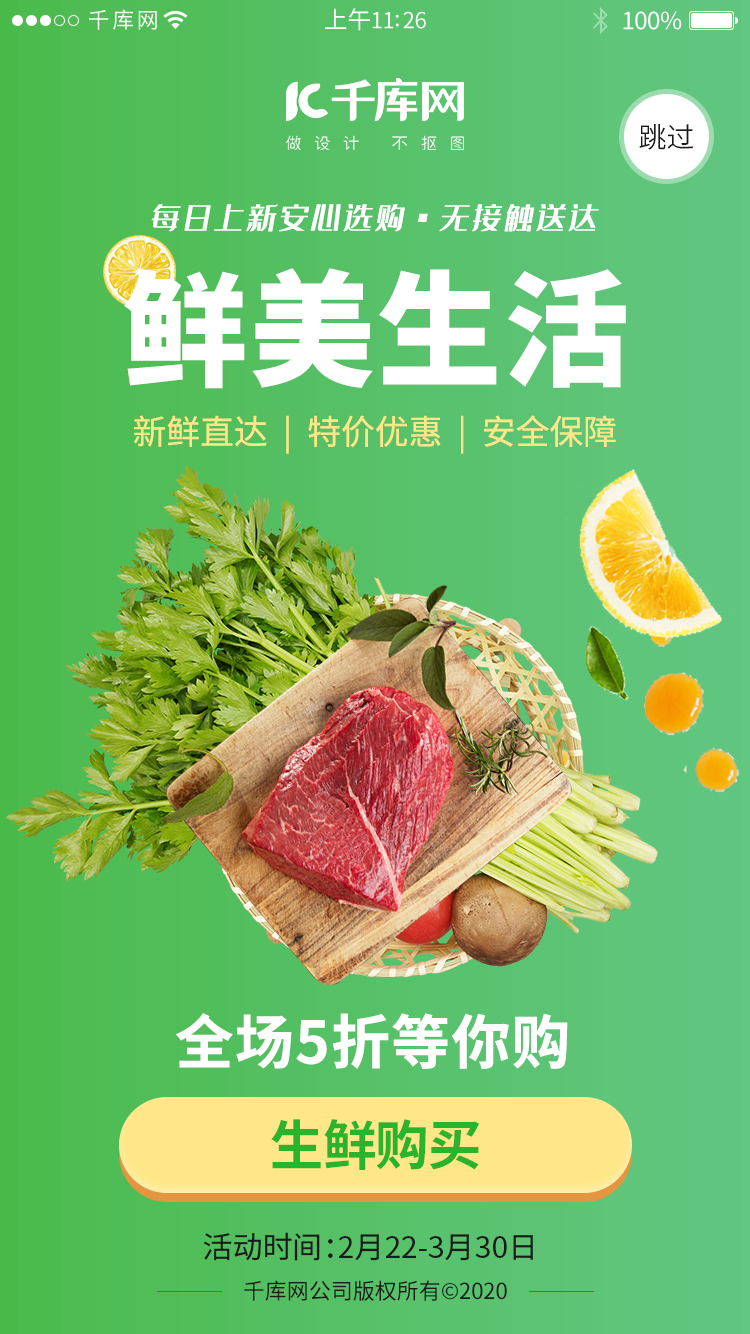
<style>
.page{position:relative;width:750px;height:1334px}
.page>*{position:absolute;margin:0}
.t1{font:22px "SourceHanSansCN-Regular";letter-spacing:0.12em;color:#ffffff}
.t2{font:22px "SourceHanSansCN-Regular";letter-spacing:-0.02em;color:#ffffff}
.t3{font:24px "SourceHanSansCN-Regular";letter-spacing:-0.02em;color:#ffffff}
.t4{font:28px "SourceHanSansCN-Normal";color:#1a1a1a}
.t5{font:27.7px "35--Regular";letter-spacing:0.16em;color:#ffffff;text-transform:uppercase;font-style:italic}
.t6{font:124px "SourceHanSansCN-Heavy";color:#ffffff;text-transform:uppercase;font-weight:bold}
.t7{font:34px "SourceHanSansCN-Regular";color:#ffe789}
.t8{font:58.6px "SourceHanSansCN-Bold";color:#ffffff;text-transform:uppercase;font-weight:bold}
.t9{font:54px "SourceHanSansCN-Bold";letter-spacing:-0.02em;color:#2ab32d}
.t10{font:30px "SourceHanSansCN-Regular";color:#1a1a1a}
.t11{font:22px "SourceHanSansCN-Regular";color:#1a1a1a}
</style>
<div class="page">
<p class="t1" style="left:89px;top:9px;width:68px;height:21px">千库网</p>
<p class="t2" style="left:325px;top:8px;width:101px;height:23px"><span class="t3">上午</span>11:26</p>
<p class="t3" style="left:623px;top:11px;width:59px;height:19px">100%</p>
<p class="t4" style="left:639px;top:124px;width:55px;height:26px">跳过</p>
<p class="t5" style="left:151px;top:204px;width:448px;height:28px">每日上新安心选购·无接触送达</p>
<p class="t6" style="left:124px;top:268px;width:502px;height:121px">鲜美生活</p>
<p class="t7" style="left:134px;top:415px;width:482px;height:39px">新鲜直达  |  特价优惠  |  安全保障</p>
<p class="t8" style="left:176px;top:1013px;width:392px;height:56px">全场5折等你购</p>
<p class="t9" style="left:271px;top:1119px;width:208px;height:51px">生鲜购买</p>
<p class="t10" style="left:203px;top:1232px;width:330px;height:29px">活动时间：2月22-3月30日</p>
<p class="t11" style="left:244px;top:1280px;width:263px;height:21px">千库网公司版权所有©2020</p>
</div>
